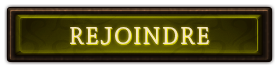
<style>
.page{position:relative;width:280px;height:70px}
.page>*{position:absolute;margin:0}
.t1{font:25px "ChaparralPro-Regular";letter-spacing:0.05em;color:#f4e5bf;text-transform:uppercase}
</style>
<div class="page">
<p class="t1" style="left:70px;top:27px;width:139px;height:18px">Rejoindre</p>
</div>
